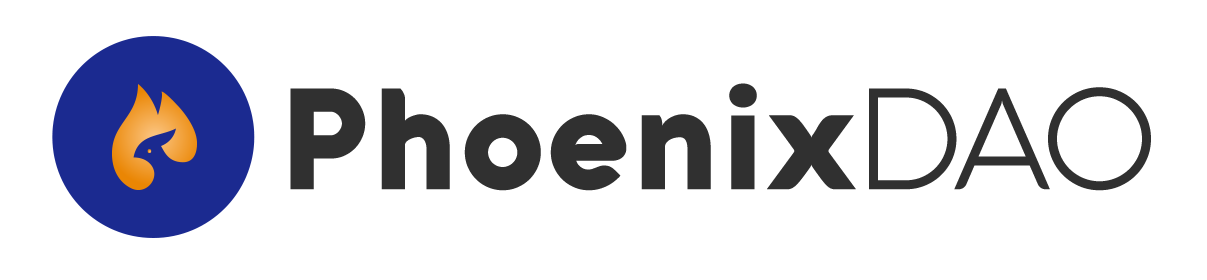
<style>
.page{position:relative;width:1207px;height:280px;background:#ffffff}
.page>*{position:absolute;margin:0}
.t1{font:140.2px "Aquawax-Black";color:#303030}
.t2{font:140.2px "Aquawax-Light";color:#303030}
</style>
<div class="page">
<p class="t1" style="left:290px;top:83px;width:861px;height:108px">Phoenix<span class="t2">DAO</span></p>
</div>
